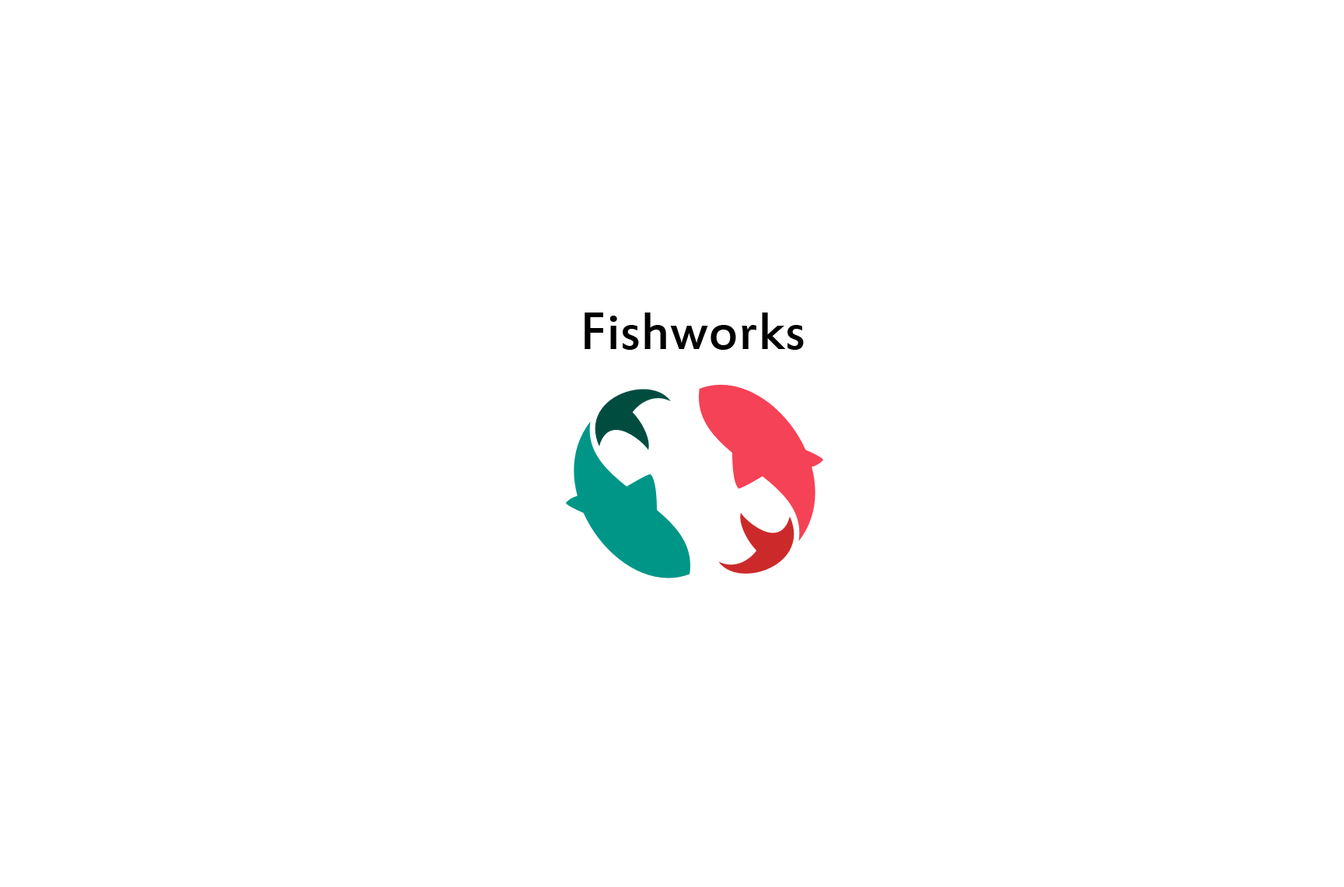
<style>
.page{position:relative;width:1344px;height:887px;background:#ffffff}
.page>*{position:absolute;margin:0}
.t1{font:58.3px "EstrangeloEdessa";color:#000000}
</style>
<div class="page">
<p class="t1" style="left:585px;top:313px;width:219px;height:37px">Fishworks</p>
</div>
